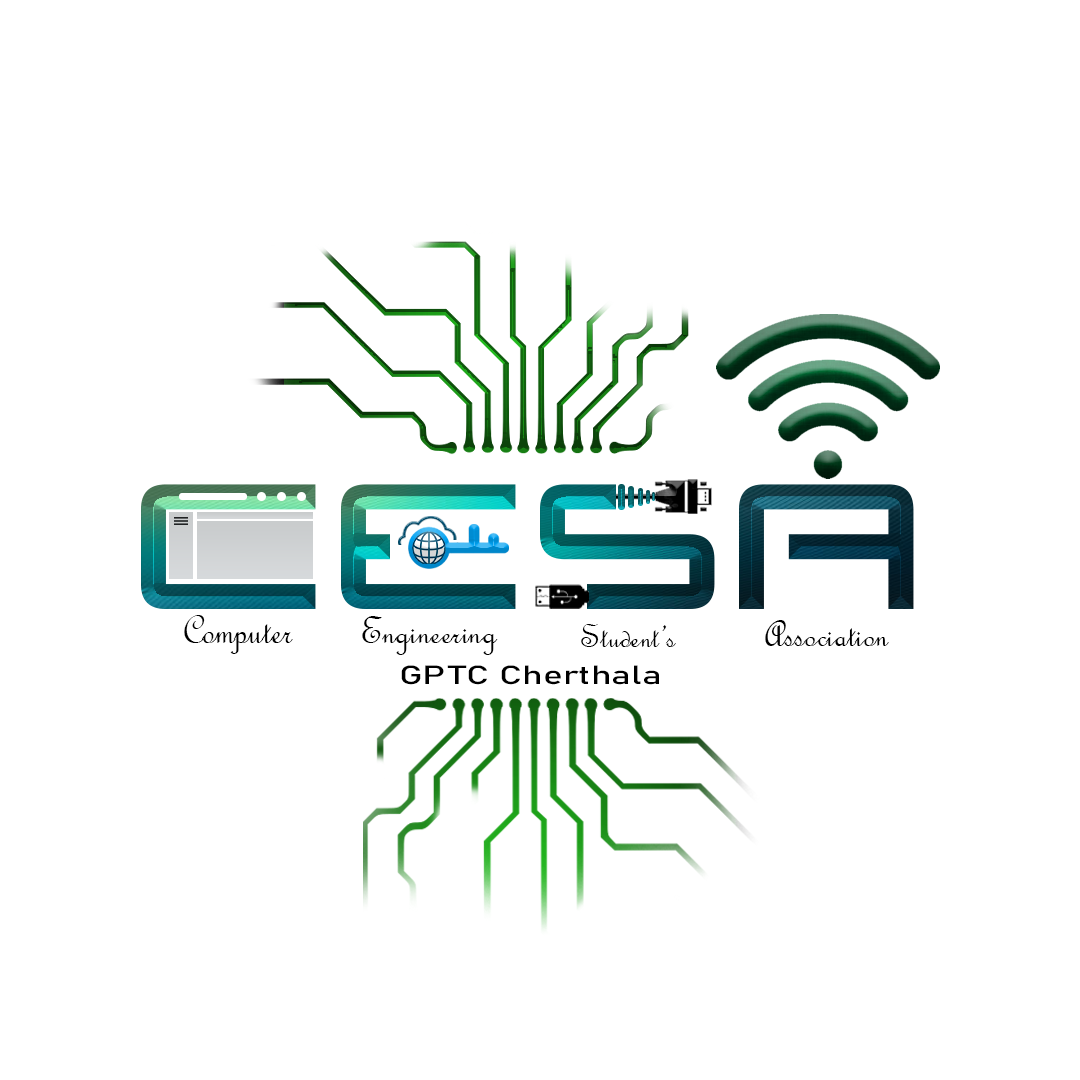
<style>
.page{position:relative;width:1080px;height:1080px;background:#ffffff}
.page>*{position:absolute;margin:0}
.t1{font:40.6px "FrenchScriptMT";color:#000000}
.t2{font:40.1px "FrenchScriptMT";color:#000000}
.t3{font:35.4px "FrenchScriptMT";color:#000000}
.t4{font:39px "FrenchScriptMT";color:#000000}
.t5{font:26px "Bahnschrift";color:#000000;scale:1.43 1}
</style>
<div class="page">
<p class="t1" style="left:184px;top:615px;width:109px;height:39px">Computer</p>
<p class="t2" style="left:362px;top:616px;width:136px;height:39px">Engineering</p>
<p class="t3" style="left:581px;top:624px;width:95px;height:23px">Student’s</p>
<p class="t4" style="left:765px;top:620px;width:124px;height:26px">Association</p>
<p class="t5" style="left:401px;top:665px;width:258px;height:20px">GPTC Cherthala</p>
</div>
